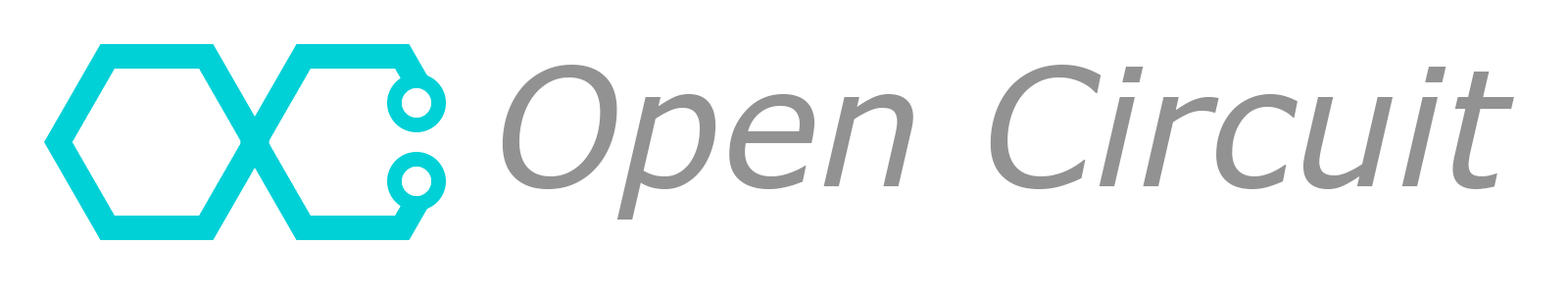
<style>
.page{position:relative;width:1568px;height:294px;background:#ffffff}
.page>*{position:absolute;margin:0}
.t1{font:163.3px "Verdana-Italic";color:#929292}
</style>
<div class="page">
<p class="t1" style="left:502px;top:65px;width:1012px;height:155px">Open Circuit</p>
</div>
